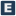
<style>
.page{position:relative;width:16px;height:16px;background:#213b54}
.page>*{position:absolute;margin:0}
.t1{font:12px "Verdana-Bold";color:#f0f0f0;font-weight:bold}
</style>
<div class="page">
<p class="t1" style="left:4px;top:3px;width:8px;height:10px">E</p>
</div>
